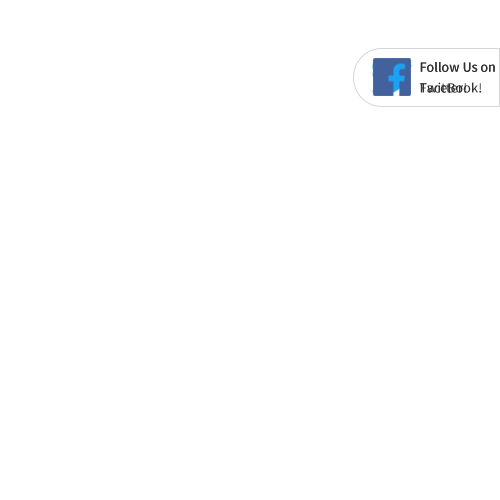
<style>
.page{position:relative;width:500px;height:500px;background:#ffffff}
.page>*{position:absolute;margin:0}
.t1{font:12.5px/20.8px "SourceHanSansCN-Medium";color:#323232}
</style>
<div class="page">
<p class="t1" style="left:419px;top:62px;width:76px;height:31px">Follow Us on Twitter!</p>
<p class="t1" style="left:420px;top:62px;width:75px;height:31px">Follow Us on<br>FaceBook!</p>
</div>
